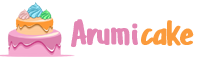
<style>
.page{position:relative;width:200px;height:60px;background:#ffffff}
.page>*{position:absolute;margin:0}
.t1{font:36px "Gisele";letter-spacing:-0.08em;color:#e386b3}
.t2{font:36px "Gisele";color:#e386b3}
.t3{font:36px "Gisele";letter-spacing:-0.08em;color:#fb9b3c}
.t4{font:36px "Gisele";letter-spacing:-0.1em;color:#fb9b3c}
</style>
<div class="page">
<p class="t1" style="left:71px;top:19px;width:123px;height:29px">Arum<span class="t2">i</span><span class="t3">c</span><span class="t4">a</span><span class="t3">ke</span></p>
</div>
